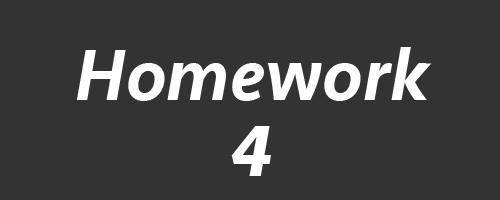
<style>
.page{position:relative;width:500px;height:200px;background:#333333}
.page>*{position:absolute;margin:0}
.t1{font:75px "Seravek-MediumItalic";color:#ffffff}
.t2{font:75px "Seravek-BoldItalic";color:#ffffff}
</style>
<div class="page">
<p class="t1" style="left:76px;top:47px;width:356px;height:54px">Homework</p>
<p class="t2" style="left:231px;top:126px;width:40px;height:50px">4</p>
</div>
